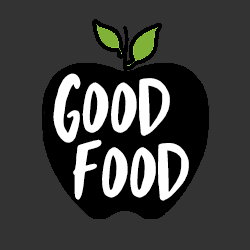
<style>
.page{position:relative;width:250px;height:250px;background:#333333}
.page>*{position:absolute;margin:0}
.t1{font:90px/64.6px "GardenFlower-Regular";letter-spacing:-0.075em;color:#ffffff}
.t2{font:90px/64.6px "GardenFlower-Regular";letter-spacing:-0.1em;color:#ffffff}
</style>
<div class="page">
<p class="t1" style="left:53px;top:73px;width:136px;height:128px;text-align:center">good<br><span class="t2"> f</span>ood</p>
</div>
